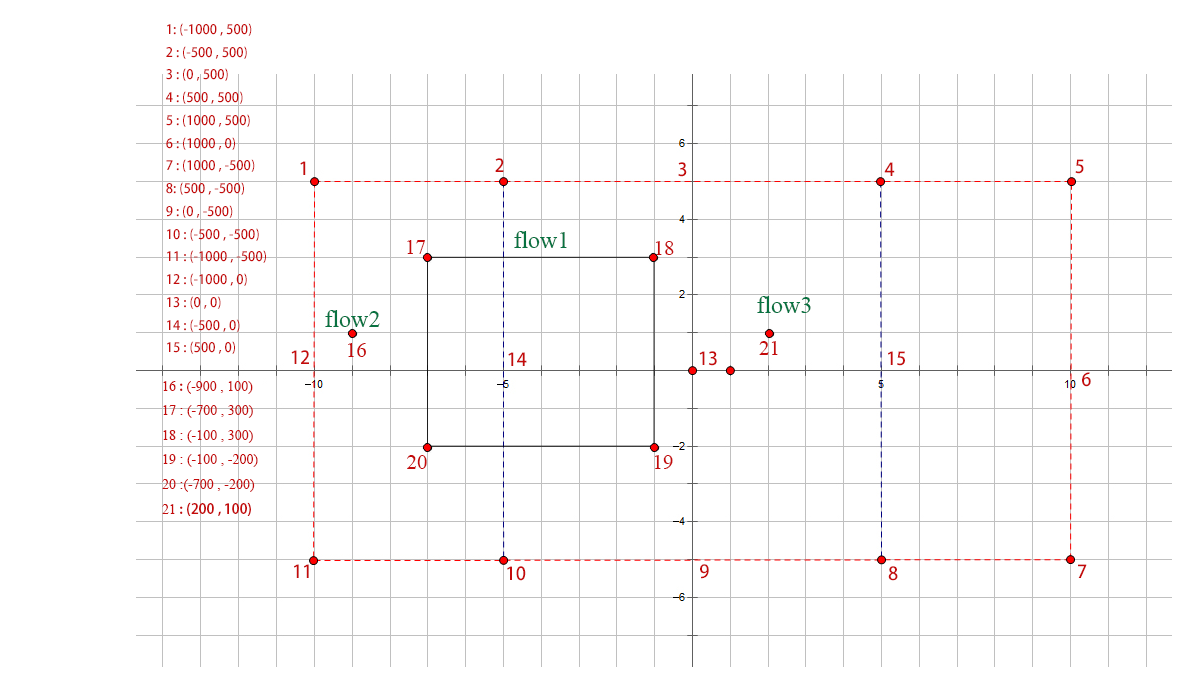
<style>
.page{position:relative;width:1200px;height:700px;background:#ffffff}
.page>*{position:absolute;margin:0}
.t1{font:13px "AdobeHeitiStd-Regular";color:#c40a0a}
.t2{font:18px "AdobeHeitiStd-Regular";color:#c40a0a}
.t3{font:24px "TimesNewRomanPSMT";color:#087241}
.t4{font:21px "TimesNewRomanPSMT";color:#c40a0a}
.t5{font:14px "TimesNewRomanPSMT";color:#c40a0a}
.t6{font:14px "AdobeHeitiStd-Regular";color:#c40a0a}
</style>
<div class="page">
<p class="t1" style="left:166px;top:23px;width:100px;height:331px">1: (-1000 , 500)<br>2 : (-500 , 500)<br>3 : (0 , 500)<br>4 : (500 , 500)<br>5 : (1000 , 500)<br>6 : (1000 , 0)<br>7 : (1000 , -500)<br>8: (500 , -500)<br>9 : (0 , -500)<br>10 : (-500 , -500)<br>11 : (-1000 , -500)<br>12 : (-1000 , 0)<br>13 : (0 , 0)<br>14 : (-500 , 0)<br>15 : (500 , 0)</p>
<p class="t2" style="left:300px;top:161px;width:6px;height:14px">1</p>
<p class="t2" style="left:495px;top:158px;width:9px;height:14px">2</p>
<p class="t2" style="left:1075px;top:159px;width:9px;height:15px">5</p>
<p class="t2" style="left:678px;top:162px;width:9px;height:15px">3</p>
<p class="t2" style="left:884px;top:162px;width:11px;height:14px">4</p>
<p class="t3" style="left:514px;top:231px;width:53px;height:17px">flow1</p>
<p class="t4" style="left:407px;top:240px;width:18px;height:14px">17</p>
<p class="t4" style="left:655px;top:241px;width:19px;height:14px">18</p>
<p class="t3" style="left:757px;top:296px;width:54px;height:17px">flow3</p>
<p class="t3" style="left:325px;top:310px;width:55px;height:17px">flow2</p>
<p class="t4" style="left:759px;top:341px;width:19px;height:14px">21</p>
<p class="t2" style="left:291px;top:350px;width:18px;height:14px">12</p>
<p class="t4" style="left:348px;top:343px;width:18px;height:14px">16</p>
<p class="t2" style="left:508px;top:352px;width:19px;height:14px">14</p>
<p class="t2" style="left:699px;top:351px;width:18px;height:15px">13</p>
<p class="t2" style="left:888px;top:351px;width:17px;height:15px">15</p>
<p class="t2" style="left:1082px;top:372px;width:9px;height:15px">6</p>
<p class="t5" style="left:162px;top:381px;width:96px;height:135px">16 <span class="t6">:</span> (-900 , 100)<br>17 : (-700 , 300)<br>18 : (-100 , 300)<br>19 : (-100 , -200)<br>20 :(-700 , -200)<br>21 <span class="t6">: (200 , 100)</span></p>
<p class="t4" style="left:407px;top:455px;width:20px;height:14px">20</p>
<p class="t4" style="left:654px;top:455px;width:19px;height:14px">19</p>
<p class="t2" style="left:294px;top:564px;width:15px;height:14px">11</p>
<p class="t2" style="left:507px;top:566px;width:19px;height:15px">10</p>
<p class="t2" style="left:700px;top:564px;width:9px;height:15px">9</p>
<p class="t2" style="left:888px;top:566px;width:10px;height:15px">8</p>
<p class="t2" style="left:1078px;top:564px;width:9px;height:14px">7</p>
</div>
